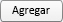
<style>
.page{position:relative;width:63px;height:22px}
.page>*{position:absolute;margin:0}
.t1{font:12px "Calibri";color:#000000}
</style>
<div class="page">
<p class="t1" style="left:12px;top:6px;width:38px;height:10px">Agregar</p>
</div>
